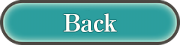
<style>
.page{position:relative;width:180px;height:45px;background:#2c9e9e}
.page>*{position:absolute;margin:0}
.t1{font:24px "RyuminPro-ExBold";letter-spacing:-0.04em;color:#fffffa}
</style>
<div class="page">
<p class="t1" style="left:63px;top:13px;width:54px;height:19px">Back</p>
</div>
